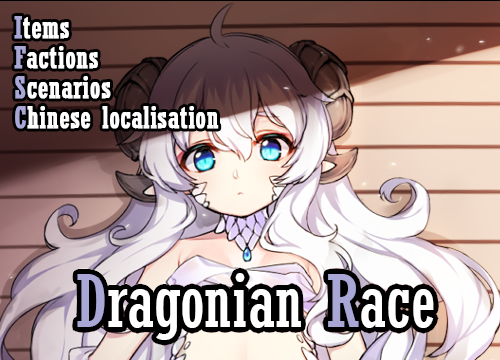
<style>
.page{position:relative;width:500px;height:360px}
.page>*{position:absolute;margin:0}
.t1{font:30px/30px "Rockwell-Condensed";color:#ffffff;font-weight:bold}
.t2{font:30px/30px "Rockwell-Condensed";color:#a8a7d6;font-weight:bold}
</style>
<div class="page">
<p class="t1" style="left:14px;top:16px;width:205px;height:113px"><span class="t2">I</span>tems<br><span class="t2">F</span>actions<br><span class="t2">S</span>cenarios<br><span class="t2">C</span>hinese localisation</p>
</div>
